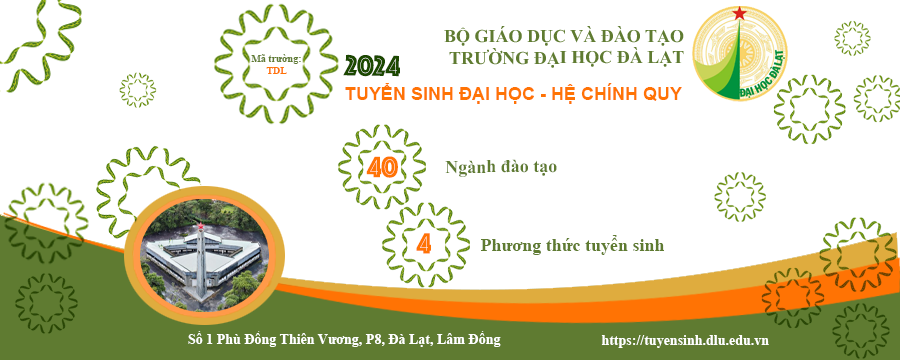
<style>
.page{position:relative;width:900px;height:360px;background:#ffffff}
.page>*{position:absolute;margin:0}
.t1{font:18px "TimesNewRomanPS-BoldMT";color:#5f7b31}
.t2{font:10px "TimesNewRomanPS-BoldMT";color:#5f7b31}
.t3{font:10px "TimesNewRomanPS-BoldMT";color:#ff7304}
.t4{font:30px "Phosphate-Inline";color:#1c4800}
.t5{font:18px "Arial-BoldMT";color:#ff7304}
.t6{font:30px "Phosphate-Inline";color:#ff7304}
.t7{font:14px "TimesNewRomanPS-BoldMT";color:#ffffff}
</style>
<div class="page">
<p class="t1" style="left:444px;top:26px;width:240px;height:42px;text-align:right">BỘ GIÁO DỤC VÀ ĐÀO TẠO<br>TRƯỜNG ĐẠI HỌC ĐÀ LẠT</p>
<p class="t2" style="left:251px;top:54px;width:50px;height:20px;text-align:center">Mã trường:<br><span class="t3">TDL</span></p>
<p class="t4" style="left:343px;top:54px;width:57px;height:23px;rotate:1deg">2024</p>
<p class="t5" style="left:345px;top:83px;width:337px;height:21px">TUYỂN SINH ĐẠI HỌC - HỆ CHÍNH QUY</p>
<p class="t6" style="left:366px;top:156px;width:32px;height:22px">40</p>
<p class="t1" style="left:445px;top:159px;width:112px;height:18px">Ngành đào tạo</p>
<p class="t6" style="left:416px;top:233px;width:15px;height:21px">4</p>
<p class="t1" style="left:481px;top:235px;width:183px;height:20px">Phương thức tuyển sinh</p>
<p class="t7" style="left:188px;top:331px;width:313px;height:16px">Số 1 Phù Đổng Thiên Vương, P8, Đà Lạt, Lâm Đồng</p>
<p class="t7" style="left:601px;top:335px;width:168px;height:13px">https://tuyensinh.dlu.edu.vn</p>
</div>
